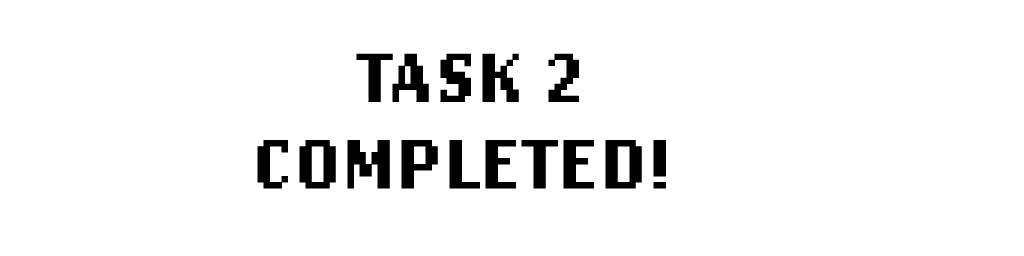
<style>
.page{position:relative;width:1024px;height:256px;background:#ffffff}
.page>*{position:absolute;margin:0}
.t1{font:72px "LoRes12OT-Bold";color:#000000}
</style>
<div class="page">
<p class="t1" style="left:257px;top:53px;width:409px;height:136px;text-align:center">TASK 2<br>COMPLETED!</p>
</div>
